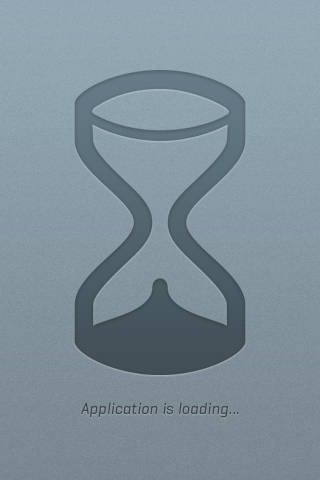
<style>
.page{position:relative;width:320px;height:480px}
.page>*{position:absolute;margin:0}
.t1{font:16px "Geogrotesque-RegularItalic";letter-spacing:0.02em;color:#3d454a}
</style>
<div class="page">
<p class="t1" style="left:81px;top:402px;width:158px;height:16px">Application is loading...</p>
</div>
